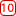
<style>
.page{position:relative;width:16px;height:16px;background:#ffffff}
.page>*{position:absolute;margin:0}
.t1{font:12.9px "MyriadPro-Semibold";color:#ff0000}
</style>
<div class="page">
<p class="t1" style="left:1px;top:3px;width:13px;height:9px">10</p>
</div>
